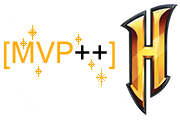
<style>
.page{position:relative;width:180px;height:120px;background:#ffffff}
.page>*{position:absolute;margin:0}
.t1{font:30px "ArialNova";color:#ffaa00}
.t2{font:30px "ArialNova";color:#000000}
</style>
<div class="page">
<p class="t1" style="left:4px;top:41px;width:111px;height:28px">[MVP<span class="t2">++</span>]</p>
</div>
